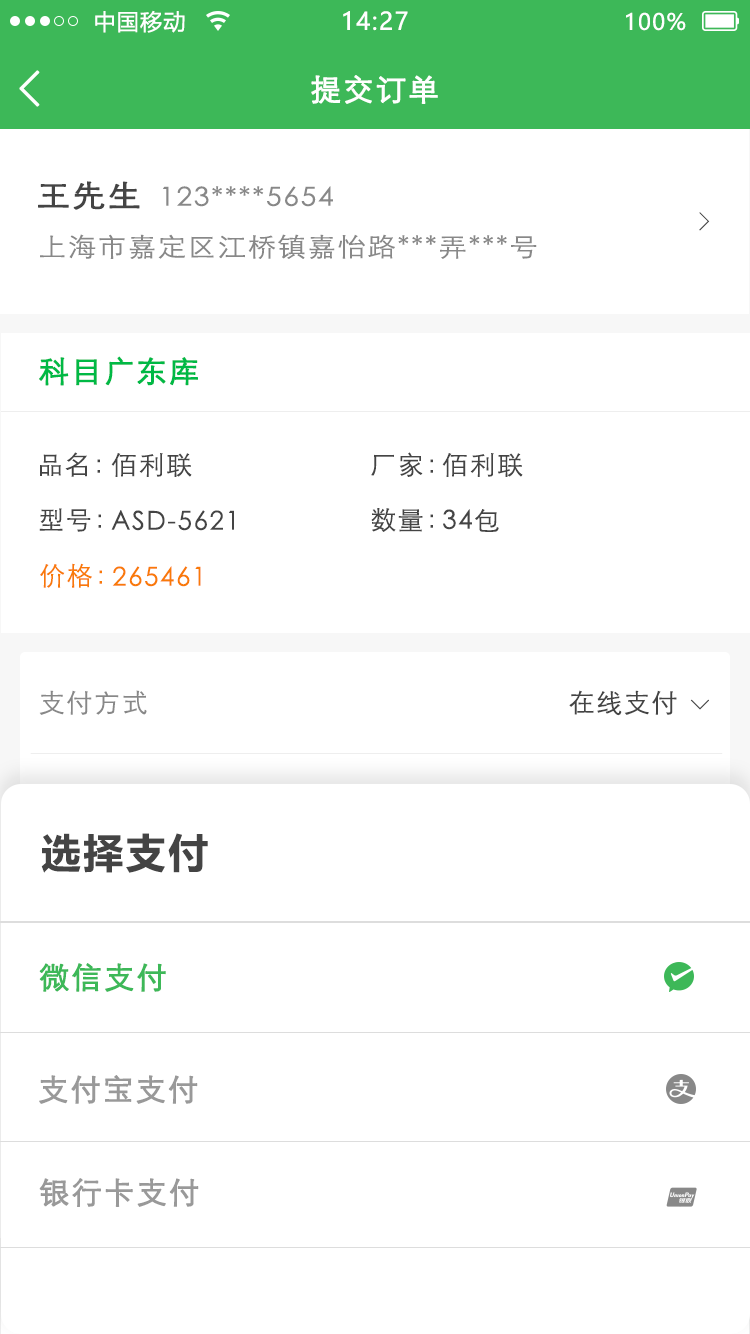
<style>
.page{position:relative;width:750px;height:1334px;background:#ffffff}
.page>*{position:absolute;margin:0}
.t1{font:22px "MicrosoftYaHei";letter-spacing:0.06em;color:#ffffff}
.t2{font:24px "MicrosoftYaHei";letter-spacing:0.06em;color:#ffffff}
.t3{font:49.8px "NSimSun";letter-spacing:0.06em;color:#fefffe;font-weight:bold}
.t4{font:30px "STXihei";letter-spacing:0.06em;color:#fefffe;font-weight:bold}
.t5{font:30px "STXihei";letter-spacing:0.06em;color:#444444;font-weight:bold;scale:1.09 1}
.t6{font:26px "STXihei";letter-spacing:0.06em;color:#888888;scale:1.09 1}
.t7{font:25.9px "NSimSun";letter-spacing:0.06em;color:#444444}
.t8{font:30px "STXihei";letter-spacing:0.06em;color:#00b945;font-weight:bold}
.t9{font:26px "STXihei";letter-spacing:0.06em;color:#444444}
.t10{font:26px "STXihei";letter-spacing:0.06em;color:#f97a08}
.t11{font:26px "STXihei";letter-spacing:0.06em;color:#888888}
.t12{font:40px "MicrosoftYaHei-Bold";letter-spacing:0.06em;color:#444444}
.t13{font:29.9px "STXihei";letter-spacing:0.06em;color:#3db858;font-weight:bold}
.t14{font:29.9px "STXihei";letter-spacing:0.06em;color:#999999;font-weight:bold}
</style>
<div class="page">
<p class="t1" style="left:95px;top:10px;width:90px;height:23px">中国移动</p>
<p class="t2" style="left:343px;top:11px;width:65px;height:20px">14:27</p>
<p class="t1" style="left:626px;top:12px;width:60px;height:19px">100%</p>
<p class="t3" style="left:19px;top:70px;width:21px;height:37px">&lt;</p>
<p class="t4" style="left:311px;top:75px;width:127px;height:29px">提交订单</p>
<p class="t5" style="left:38px;top:181px;width:102px;height:29px">王先生</p>
<p class="t6" style="left:163px;top:186px;width:170px;height:21px">123****5654</p>
<p class="t7" style="left:699px;top:212px;width:11px;height:19px">&gt;</p>
<p class="t6" style="left:40px;top:234px;width:497px;height:25px">上海市嘉定区江桥镇嘉怡路***弄***号</p>
<p class="t8" style="left:39px;top:356px;width:159px;height:30px">科目广东库</p>
<p class="t9" style="left:40px;top:452px;width:60px;height:25px">品名：</p>
<p class="t9" style="left:111px;top:453px;width:81px;height:24px">佰利联</p>
<p class="t9" style="left:371px;top:452px;width:62px;height:25px">厂家：</p>
<p class="t9" style="left:442px;top:453px;width:81px;height:24px">佰利联</p>
<p class="t9" style="left:39px;top:508px;width:62px;height:24px">型号：</p>
<p class="t9" style="left:111px;top:510px;width:123px;height:21px">ASD-5621</p>
<p class="t9" style="left:371px;top:508px;width:62px;height:24px">数量：</p>
<p class="t9" style="left:443px;top:509px;width:56px;height:23px">34包</p>
<p class="t10" style="left:40px;top:563px;width:62px;height:25px">价格：</p>
<p class="t10" style="left:112px;top:566px;width:89px;height:21px">265461</p>
<p class="t11" style="left:39px;top:690px;width:108px;height:25px">支付方式</p>
<p class="t9" style="left:569px;top:690px;width:108px;height:26px">在线支付</p>
<p class="t7" style="left:690px;top:699px;width:19px;height:11px;rotate:90deg">&gt;</p>
<p class="t12" style="left:41px;top:833px;width:167px;height:40px">选择支付</p>
<p class="t13" style="left:39px;top:963px;width:127px;height:29px">微信支付</p>
<p class="t14" style="left:39px;top:1075px;width:159px;height:29px">支付宝支付</p>
<p class="t14" style="left:39px;top:1178px;width:160px;height:29px">银行卡支付</p>
</div>
